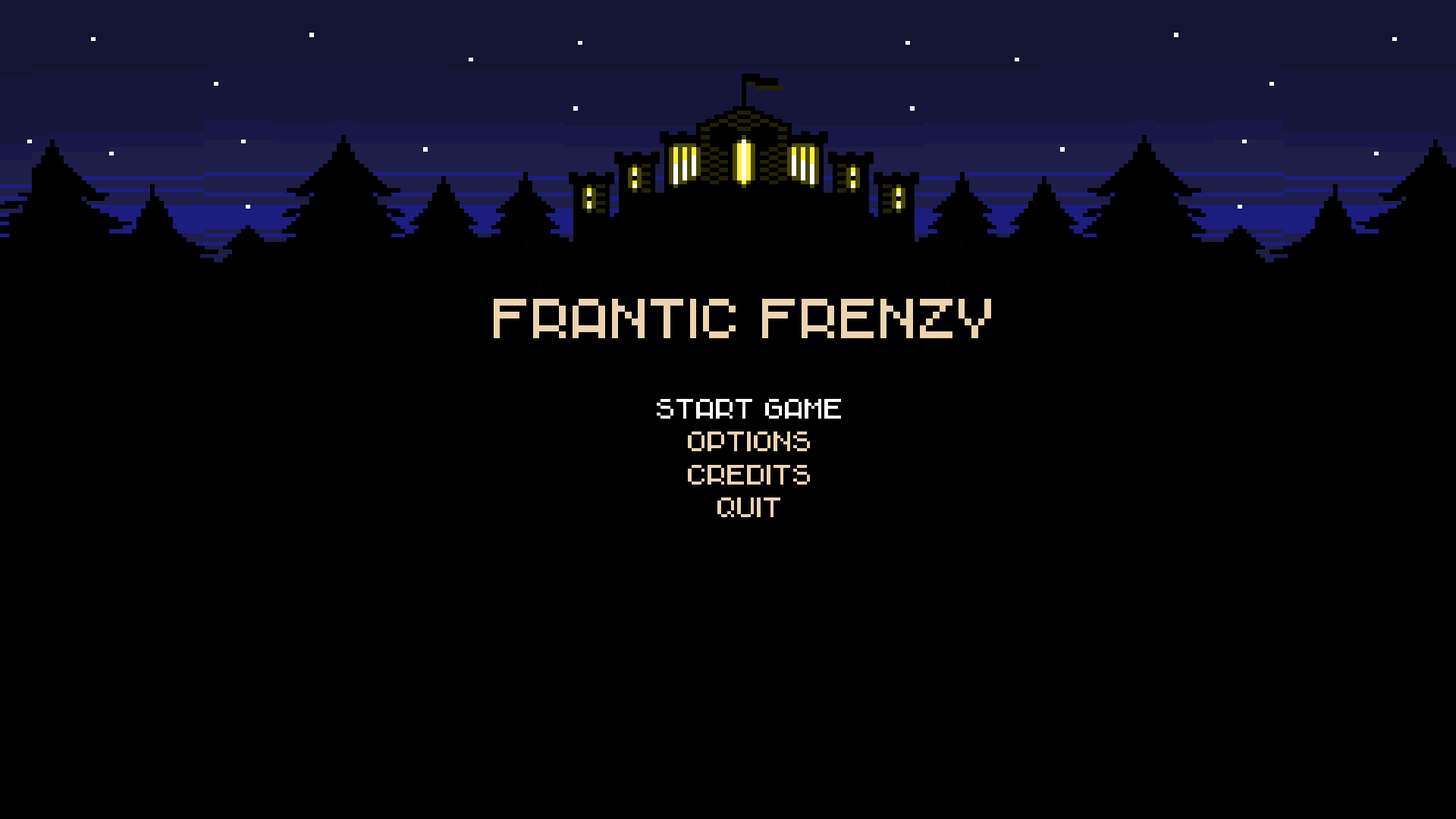
<style>
.page{position:relative;width:1456px;height:819px;background:#000000}
.page>*{position:absolute;margin:0}
.t1{font:54.6px "Chava-Regular";color:#ebd4af}
.t2{font:27.3px "Chava-Regular";color:#ffffff}
.t3{font:27.3px "Chava-Regular";color:#ebd4af}
</style>
<div class="page">
<p class="t1" style="left:494px;top:299px;width:497px;height:39px">FRANTIC FRENZY</p>
<p class="t2" style="left:657px;top:399px;width:184px;height:20px">Start game</p>
<p class="t2" style="left:657px;top:399px;width:184px;height:20px">Start game</p>
<p class="t3" style="left:688px;top:431px;width:122px;height:20px">OPTIONS</p>
<p class="t3" style="left:688px;top:465px;width:122px;height:20px">CREDITS</p>
<p class="t3" style="left:717px;top:497px;width:63px;height:20px">QUIT</p>
</div>
